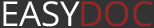
<style>
.page{position:relative;width:154px;height:28px;background:#333333}
.page>*{position:absolute;margin:0}
.t1{font:34.3px "OpenSans";color:#ffffff;text-transform:uppercase}
.t2{font:34.3px "OpenSans";color:#992626;text-transform:uppercase}
</style>
<div class="page">
<p class="t1" style="left:3px;top:1px;width:77px;height:26px">Easy</p>
<p class="t2" style="left:81px;top:1px;width:71px;height:26px">DOC</p>
</div>
